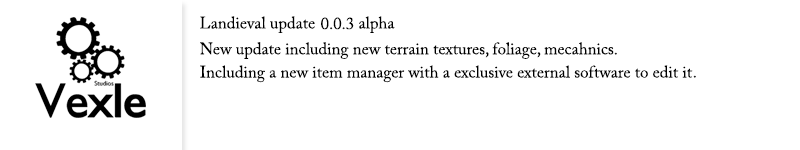
<style>
.page{position:relative;width:800px;height:150px;background:#ffffff}
.page>*{position:absolute;margin:0}
.t1{font:16.7px "ACaslonPro-Regular";color:#000000}
.t2{font:16.7px "ACaslonPro-Regular";color:#232323}
</style>
<div class="page">
<p class="t1" style="left:200px;top:16px;width:115px;height:17px">Landieval update</p>
<p class="t1" style="left:321px;top:17px;width:33px;height:13px">0.0.3</p>
<p class="t1" style="left:359px;top:16px;width:36px;height:17px">alpha</p>
<p class="t1" style="left:200px;top:42px;width:414px;height:17px">New update including new terrain textures, foliage, mecahnics</p>
<p class="t2" style="left:614px;top:52px;width:3px;height:3px">.</p>
<p class="t1" style="left:200px;top:65px;width:493px;height:18px">Including a new item manager with a exclusive external software to edit it</p>
<p class="t2" style="left:693px;top:75px;width:3px;height:3px">.</p>
</div>
